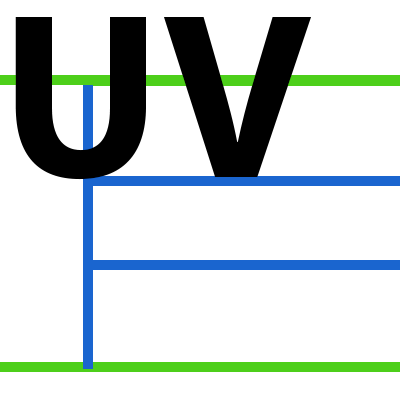
<style>
.page{position:relative;width:400px;height:400px;background:#ffffff}
.page>*{position:absolute;margin:0}
.t1{font:236.8px "MyriadPro-Bold";color:#000000}
</style>
<div class="page">
<p class="t1" style="left:15px;top:17px;width:296px;height:163px">UV</p>
</div>
